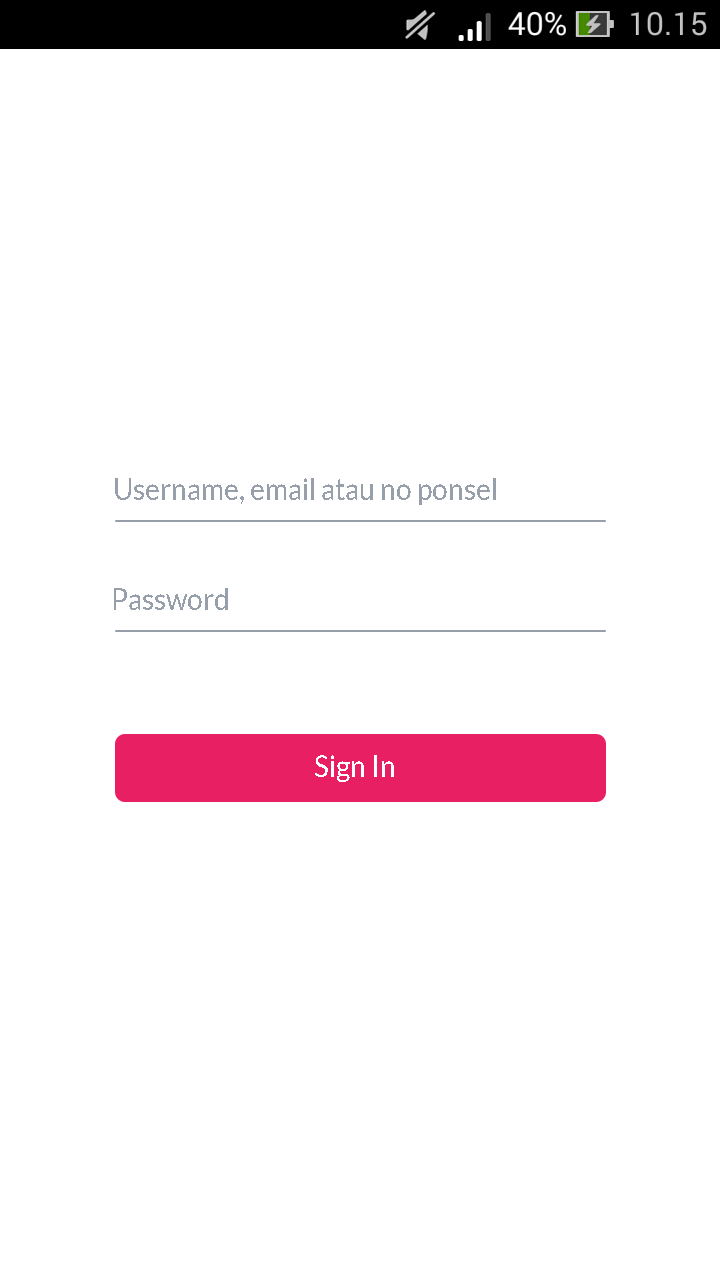
<style>
.page{position:relative;width:720px;height:1280px;background:#ffffff}
.page>*{position:absolute;margin:0}
.t1{font:29.1px "Lato-Regular";color:#969faa;scale:0.96 1}
.t2{font:29.2px "Lato-Regular";color:#969faa;scale:0.96 1}
.t3{font:29.2px "Lato-Regular";color:#ffffff;scale:0.96 1}
</style>
<div class="page">
<p class="t1" style="left:115px;top:478px;width:381px;height:27px">Username, email atau no ponsel</p>
<p class="t2" style="left:114px;top:588px;width:114px;height:22px">Password</p>
<p class="t3" style="left:315px;top:755px;width:79px;height:27px">Sign In</p>
</div>
